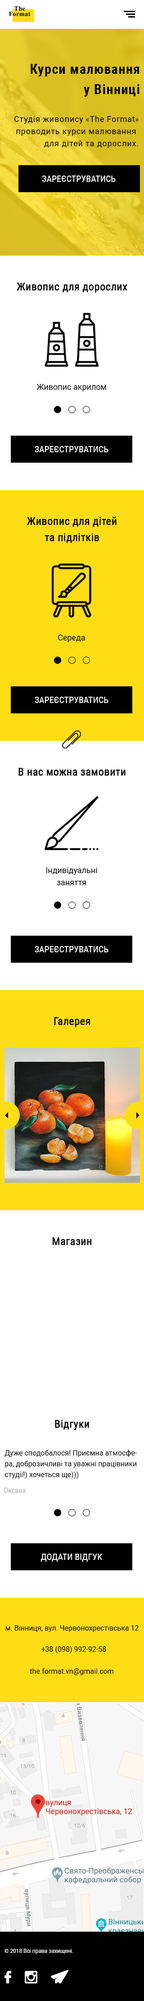
<style>
.page{position:relative;width:144px;height:2001px;background:#ffffff}
.page>*{position:absolute;margin:0}
.t1{font:13.5px/20.3px "RobotoCondensed-Bold";letter-spacing:0.05em;color:#000000}
.t2{font:13.5px "RobotoCondensed-Bold";color:#000000;text-transform:uppercase}
.t3{font:8.1px/12.2px "Roboto-Regular";letter-spacing:0.05em;color:#000000}
.t4{font:8.1px/12.2px "MyriadPro-Regular";letter-spacing:0.05em;color:#000000}
.t5{font:9px "RobotoCondensed-Regular";color:#ffffff;text-transform:uppercase}
.t6{font:10.8px "RobotoCondensed-Regular";color:#000000;font-weight:bold}
.t7{font:8.1px "Roboto-Regular";color:#000000}
.t8{font:10.8px/16.2px "RobotoCondensed-Regular";color:#000000;font-weight:bold}
.t9{font:8.1px/12.2px "Roboto-Regular";color:#000000}
.t10{font:7.2px/10.8px "Roboto-Regular";color:#000000}
.t11{font:7.2px "RobotoCondensed-Regular";color:#a5a6a8}
.t12{font:7.2px "Roboto-Regular";color:#050000}
.t13{font:7.2px "Roboto-Regular";color:#000000}
.t14{font:5.4px "Roboto-Regular";color:#ffffff}
.t15{font:5.4px "TimesNewRomanPSMT";color:#ffffff}
</style>
<div class="page">
<p class="t1" style="left:31px;top:64px;width:109px;height:33px;text-align:right"><span class="t2"><br></span>Курси малювання<br>у Вінниці</p>
<p class="t3" style="left:14px;top:116px;width:125px;height:32px;text-align:right">Студія живопису <span class="t4">«</span>The Format<span class="t4">»</span><br>проводить курси малювання <br>для дітей та дорослих.</p>
<p class="t5" style="left:42px;top:176px;width:74px;height:6px">Зареєструватись</p>
<p class="t6" style="left:17px;top:283px;width:110px;height:10px">Живопис для дорослих</p>
<p class="t7" style="left:36px;top:384px;width:70px;height:8px">Живопис акрилом</p>
<p class="t5" style="left:35px;top:446px;width:73px;height:6px">Зареєструватись</p>
<p class="t8" style="left:27px;top:517px;width:90px;height:26px;text-align:center">Живопис для дітей <br>та підлітків</p>
<p class="t7" style="left:58px;top:635px;width:27px;height:7px">Середа</p>
<p class="t5" style="left:35px;top:697px;width:73px;height:6px">Зареєструватись</p>
<p class="t6" style="left:18px;top:768px;width:108px;height:8px">В нас можна замовити</p>
<p class="t9" style="left:46px;top:867px;width:51px;height:18px;text-align:center">Індивідуальні <br>заняття</p>
<p class="t5" style="left:35px;top:946px;width:73px;height:6px">Зареєструватись</p>
<p class="t6" style="left:54px;top:1017px;width:36px;height:10px">Галерея</p>
<p class="t6" style="left:52px;top:1237px;width:40px;height:8px">Магазин</p>
<p class="t6" style="left:55px;top:1420px;width:34px;height:10px">Відгуки</p>
<p class="t10" style="left:5px;top:1450px;width:132px;height:29px">Дуже сподобалося! Приємна атмосфера, доброзичливі та уважні працівники студії!) хочеться ще)))</p>
<p class="t11" style="left:4px;top:1487px;width:21px;height:6px">Оксана</p>
<p class="t5" style="left:41px;top:1554px;width:62px;height:8px">додати відгук</p>
<p class="t12" style="left:5px;top:1625px;width:134px;height:7px">м. Вінниця, вул. Червонохрестівська 12</p>
<p class="t13" style="left:41px;top:1646px;width:65px;height:7px">+38 (098) 992-92-58</p>
<p class="t13" style="left:30px;top:1668px;width:83px;height:7px">the.format.vn@gmail.com</p>
<p class="t14" style="left:5px;top:1949px;width:68px;height:5px"><span class="t15">©</span> 2018 Всі права захищені.</p>
</div>
